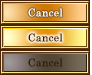
<style>
.page{position:relative;width:92px;height:75px}
.page>*{position:absolute;margin:0}
.t1{font:10.7px "CenturySchoolbook";letter-spacing:0.025em;color:#ffffff}
.t2{font:10.7px "CenturySchoolbook";letter-spacing:0.025em;color:#321a02}
</style>
<div class="page">
<p class="t1" style="left:28px;top:8px;width:35px;height:9px">Cancel</p>
<p class="t2" style="left:28px;top:33px;width:35px;height:9px">Cancel</p>
<p class="t2" style="left:28px;top:58px;width:35px;height:9px">Cancel</p>
</div>
